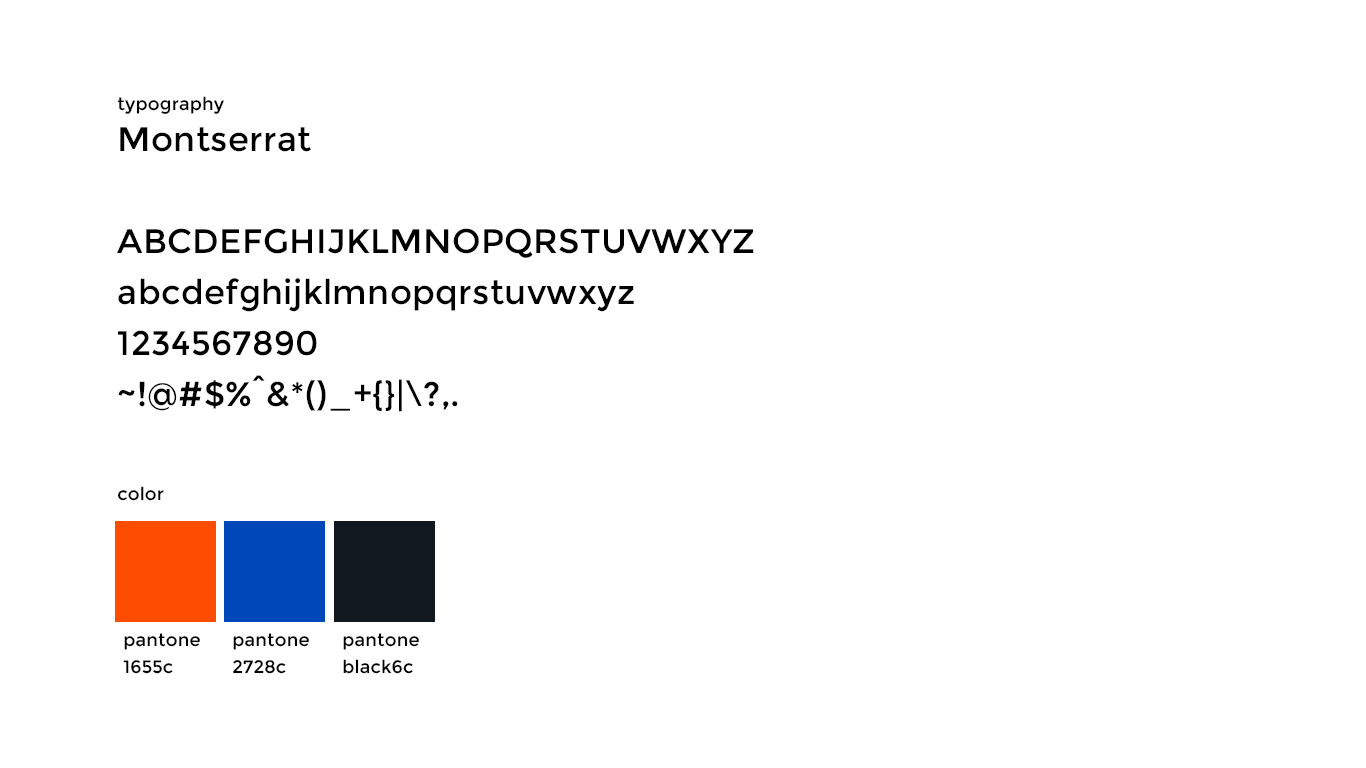
<style>
.page{position:relative;width:1366px;height:768px;background:#ffffff}
.page>*{position:absolute;margin:0}
.t1{font:34px "Montserrat-Regular";letter-spacing:0.01em;color:#000000}
.t2{font:18px "Montserrat-Regular";letter-spacing:0.01em;color:#000000}
</style>
<div class="page">
<p class="t1" style="left:117px;top:96px;width:637px;height:316px"><span class="t2">typography<br></span>Montserrat<br><br>ABCDEFGHIJKLMNOPQRSTUVWXYZ<br>abcdefghijklmnopqrstuvwxyz<br>1234567890<br>~!@#$%^&amp;*()_+{}|\?,.</p>
<p class="t2" style="left:117px;top:486px;width:47px;height:15px">color</p>
<p class="t2" style="left:123px;top:633px;width:77px;height:41px">pantone<br>1655c</p>
<p class="t2" style="left:233px;top:633px;width:76px;height:41px">pantone<br>2728c</p>
<p class="t2" style="left:343px;top:633px;width:76px;height:41px">pantone<br>black6c</p>
</div>
